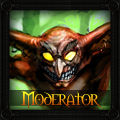
<style>
.page{position:relative;width:120px;height:120px}
.page>*{position:absolute;margin:0}
.t1{font:18px "Morpheus";letter-spacing:-0.04em}
</style>
<div class="page">
<p class="t1" style="left:21px;top:91px;width:82px;height:18px">Moderator</p>
</div>
